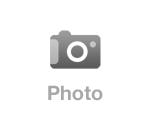
<style>
.page{position:relative;width:150px;height:130px;background:#ffffff}
.page>*{position:absolute;margin:0}
.t1{font:20px "AlteHaasGrotesk_Bold";color:#a8a8a8}
</style>
<div class="page">
<p class="t1" style="left:48px;top:85px;width:55px;height:16px">Photo</p>
</div>
